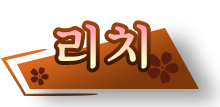
<style>
.page{position:relative;width:220px;height:107px;background:#ffffff}
.page>*{position:absolute;margin:0}
.t1{font:51px "SDKukdetopokki-aLt";letter-spacing:0.06em}
</style>
<div class="page">
<p class="t1" style="left:56px;top:24px;width:91px;height:45px">리치</p>
</div>
